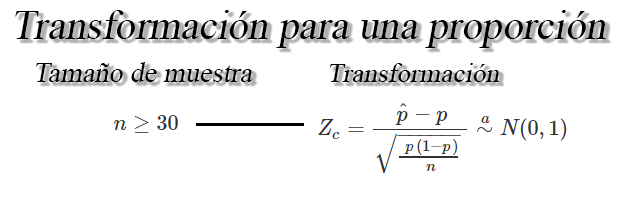
<style>
.page{position:relative;width:643px;height:201px;background:#ffffff}
.page>*{position:absolute;margin:0}
.t1{font:30.5px "TimesNewRomanPSMT";color:#000000;font-style:italic}
.t2{font:21.1px "TimesNewRomanPSMT";color:#000000;font-style:italic}
.t3{font:20.4px "TimesNewRomanPSMT";color:#000000;font-style:italic}
</style>
<div class="page">
<p class="t1" style="left:15px;top:10px;width:591px;height:38px">Transformación para una proporción</p>
<p class="t2" style="left:36px;top:62px;width:217px;height:20px">Tamaño de muestra</p>
<p class="t3" style="left:329px;top:63px;width:170px;height:19px">Transformación</p>
</div>
